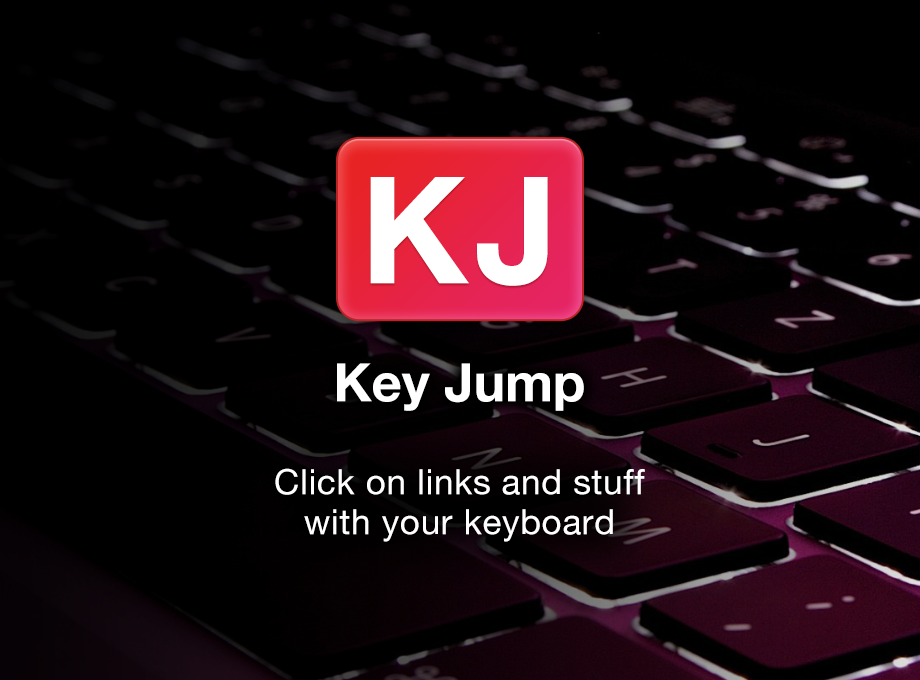
<style>
.page{position:relative;width:920px;height:680px;background:#000000}
.page>*{position:absolute;margin:0}
.t1{font:148.5px "HelveticaNeue-Bold";color:#ffffff}
.t2{font:53px "HelveticaNeue-Bold";color:#ffffff}
.t3{font:35px/40px "HelveticaNeue";letter-spacing:0.02em;color:#ffffff}
</style>
<div class="page">
<p class="t1" style="left:370px;top:177px;width:178px;height:109px">KJ</p>
<p class="t2" style="left:337px;top:363px;width:247px;height:48px">Key Jump</p>
<p class="t3" style="left:275px;top:468px;width:370px;height:74px;text-align:center">Click on links and stuff<br>with your keyboard</p>
</div>
